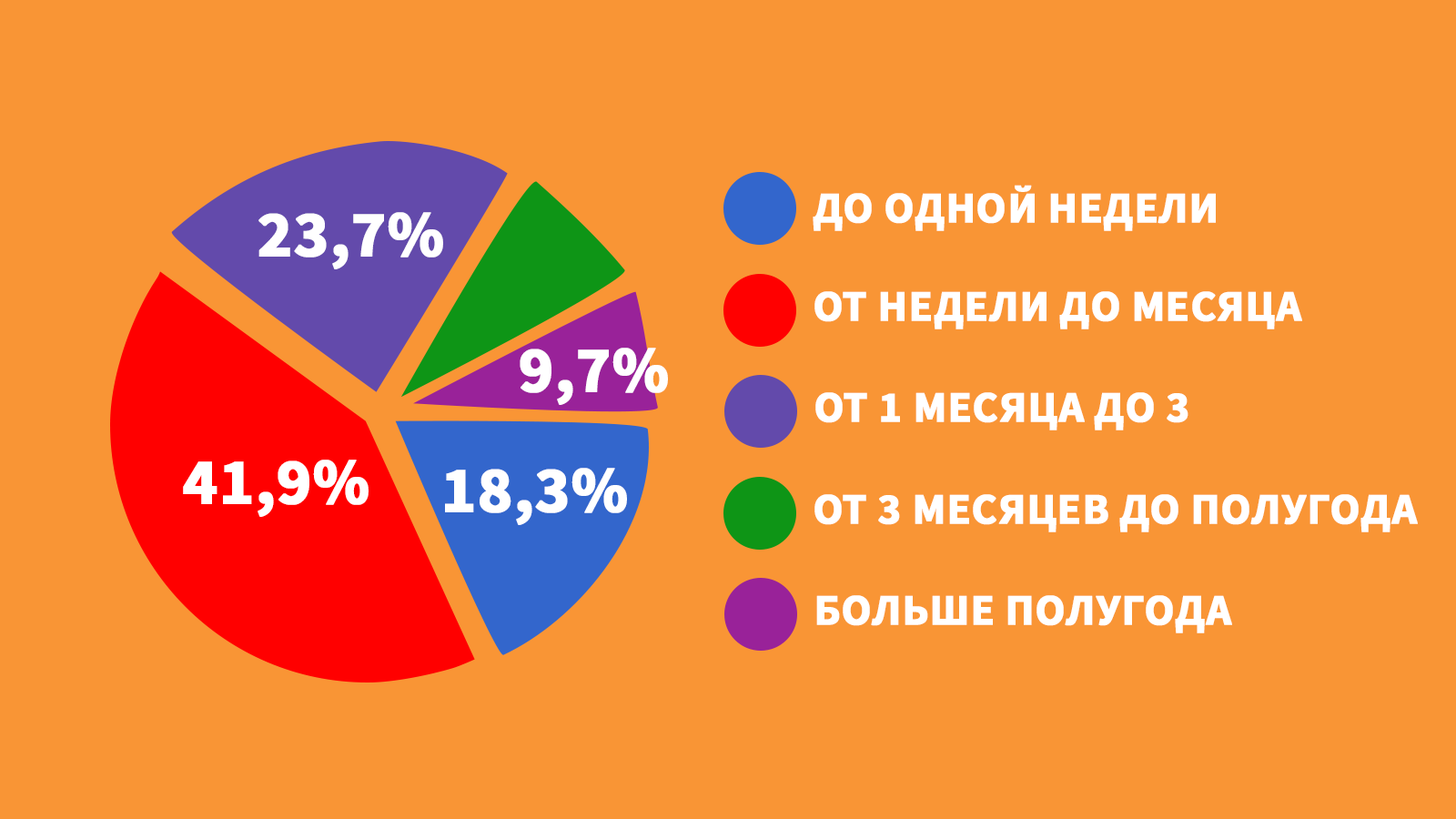
<style>
.page{position:relative;width:1456px;height:819px;background:#f99535}
.page>*{position:absolute;margin:0}
.t1{font:43.7px "SourceSansPro-Bold";color:#ffffff;text-transform:uppercase;font-weight:bold}
.t2{font:65.5px "SourceSansPro-Bold";color:#ffffff;text-transform:uppercase;font-weight:bold}
</style>
<div class="page">
<p class="t1" style="left:813px;top:185px;width:403px;height:46px">до одной недели</p>
<p class="t2" style="left:258px;top:212px;width:185px;height:57px">23,7%</p>
<p class="t1" style="left:814px;top:291px;width:488px;height:38px">от недели до месяца</p>
<p class="t2" style="left:520px;top:348px;width:148px;height:57px">9,7%</p>
<p class="t1" style="left:815px;top:392px;width:373px;height:38px">от 1 месяца до 3</p>
<p class="t2" style="left:183px;top:460px;width:186px;height:57px">41,9%</p>
<p class="t2" style="left:445px;top:468px;width:182px;height:57px">18,3%</p>
<p class="t1" style="left:814px;top:494px;width:604px;height:38px">от 3 месяцев до полугода</p>
<p class="t1" style="left:816px;top:595px;width:416px;height:38px">больше полугода</p>
</div>
